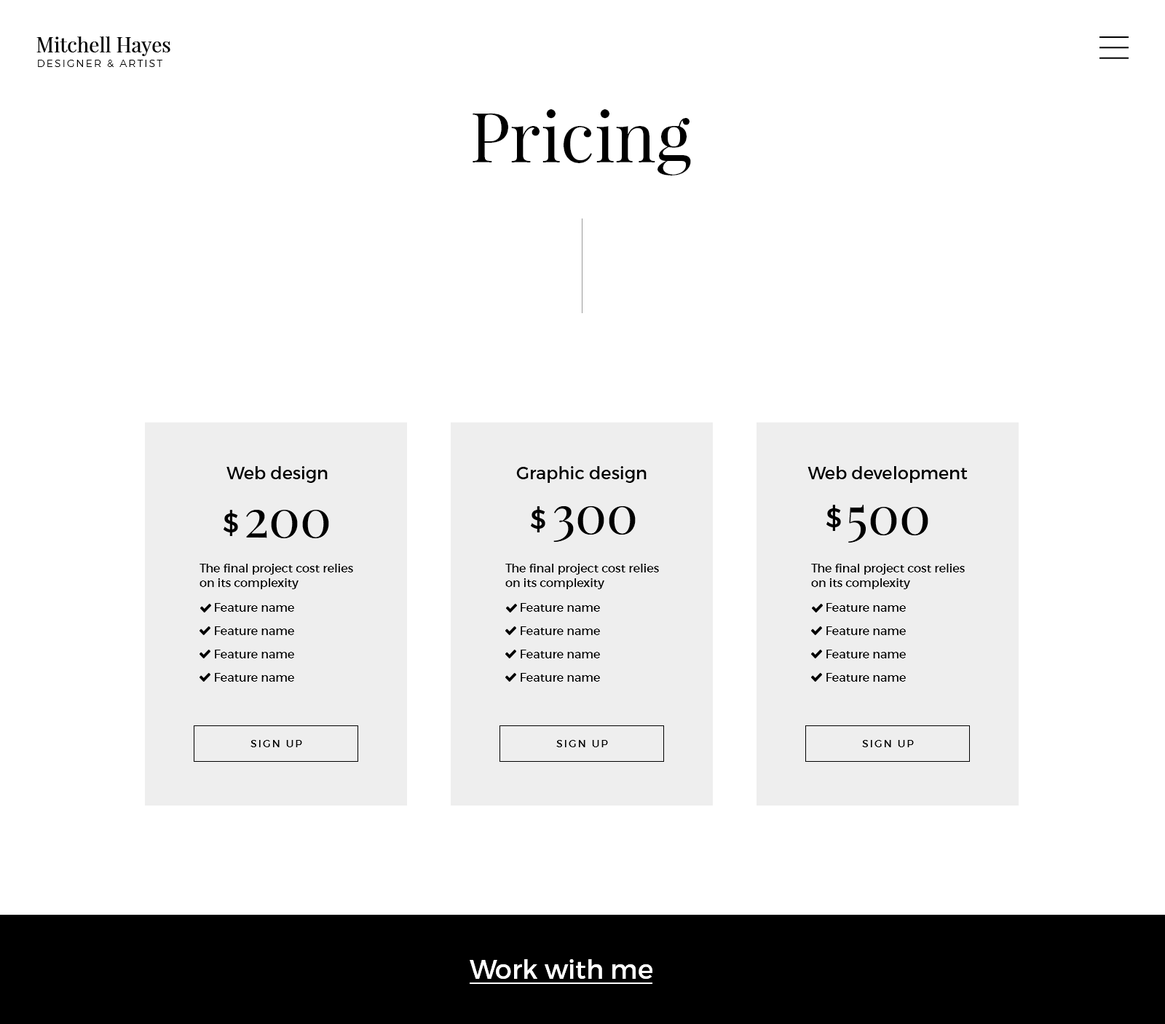
<style>
.page{position:relative;width:1165px;height:1024px;background:#ffffff}
.page>*{position:absolute;margin:0}
.t1{font:20.4px "PlayfairDisplay-Regular";color:#000000}
.t2{font:10.2px "Montserrat-Light";letter-spacing:0.15em;color:#000000}
.t3{font:69.2px "PlayfairDisplay-Regular";color:#000000}
.t4{font:17.5px "Montserrat-Regular";color:#000000}
.t5{font:26.2px "Montserrat-Regular";color:#000000}
.t6{font:52.4px "PlayfairDisplay-Regular";color:#000000}
.t7{font:11.6px "Montserrat-Regular";color:#000000}
.t8{font:10.2px "Montserrat-Regular";letter-spacing:0.15em;color:#000000}
.t9{font:26.2px "Montserrat-Regular";color:#ffffff}
</style>
<div class="page">
<p class="t1" style="left:36px;top:36px;width:134px;height:20px">Mitchell Hayes</p>
<p class="t2" style="left:38px;top:60px;width:124px;height:7px">DESIGNER &amp; ARTIST</p>
<p class="t3" style="left:473px;top:109px;width:218px;height:66px">Priсing</p>
<p class="t4" style="left:226px;top:466px;width:102px;height:17px">Web design</p>
<p class="t4" style="left:516px;top:466px;width:131px;height:17px">Graphic design</p>
<p class="t4" style="left:807px;top:466px;width:161px;height:17px">Web development</p>
<p class="t5" style="left:224px;top:510px;width:14px;height:26px">$</p>
<p class="t6" style="left:246px;top:510px;width:83px;height:29px">200</p>
<p class="t5" style="left:531px;top:506px;width:14px;height:26px">$</p>
<p class="t6" style="left:553px;top:506px;width:83px;height:36px">300</p>
<p class="t5" style="left:826px;top:505px;width:15px;height:26px">$</p>
<p class="t6" style="left:848px;top:505px;width:80px;height:37px">500</p>
<p class="t7" style="left:199px;top:564px;width:154px;height:25px">The final project cost relies <br>on its complexity</p>
<p class="t7" style="left:505px;top:564px;width:154px;height:25px">The final project cost relies <br>on its complexity</p>
<p class="t7" style="left:811px;top:564px;width:154px;height:25px">The final project cost relies <br>on its complexity</p>
<p class="t7" style="left:215px;top:603px;width:79px;height:9px">Feature name</p>
<p class="t7" style="left:521px;top:603px;width:79px;height:9px">Feature name</p>
<p class="t7" style="left:826px;top:603px;width:80px;height:9px">Feature name</p>
<p class="t7" style="left:215px;top:626px;width:79px;height:9px">Feature name</p>
<p class="t7" style="left:521px;top:626px;width:79px;height:9px">Feature name</p>
<p class="t7" style="left:826px;top:626px;width:80px;height:9px">Feature name</p>
<p class="t7" style="left:215px;top:649px;width:79px;height:9px">Feature name</p>
<p class="t7" style="left:521px;top:649px;width:79px;height:9px">Feature name</p>
<p class="t7" style="left:826px;top:649px;width:80px;height:9px">Feature name</p>
<p class="t7" style="left:215px;top:673px;width:79px;height:8px">Feature name</p>
<p class="t7" style="left:521px;top:673px;width:79px;height:8px">Feature name</p>
<p class="t7" style="left:826px;top:673px;width:80px;height:8px">Feature name</p>
<p class="t8" style="left:250px;top:740px;width:52px;height:7px">SIGN UP</p>
<p class="t8" style="left:556px;top:740px;width:52px;height:7px">SIGN UP</p>
<p class="t8" style="left:862px;top:740px;width:52px;height:7px">SIGN UP</p>
<p class="t9" style="left:470px;top:959px;width:182px;height:20px">Work with me</p>
</div>
